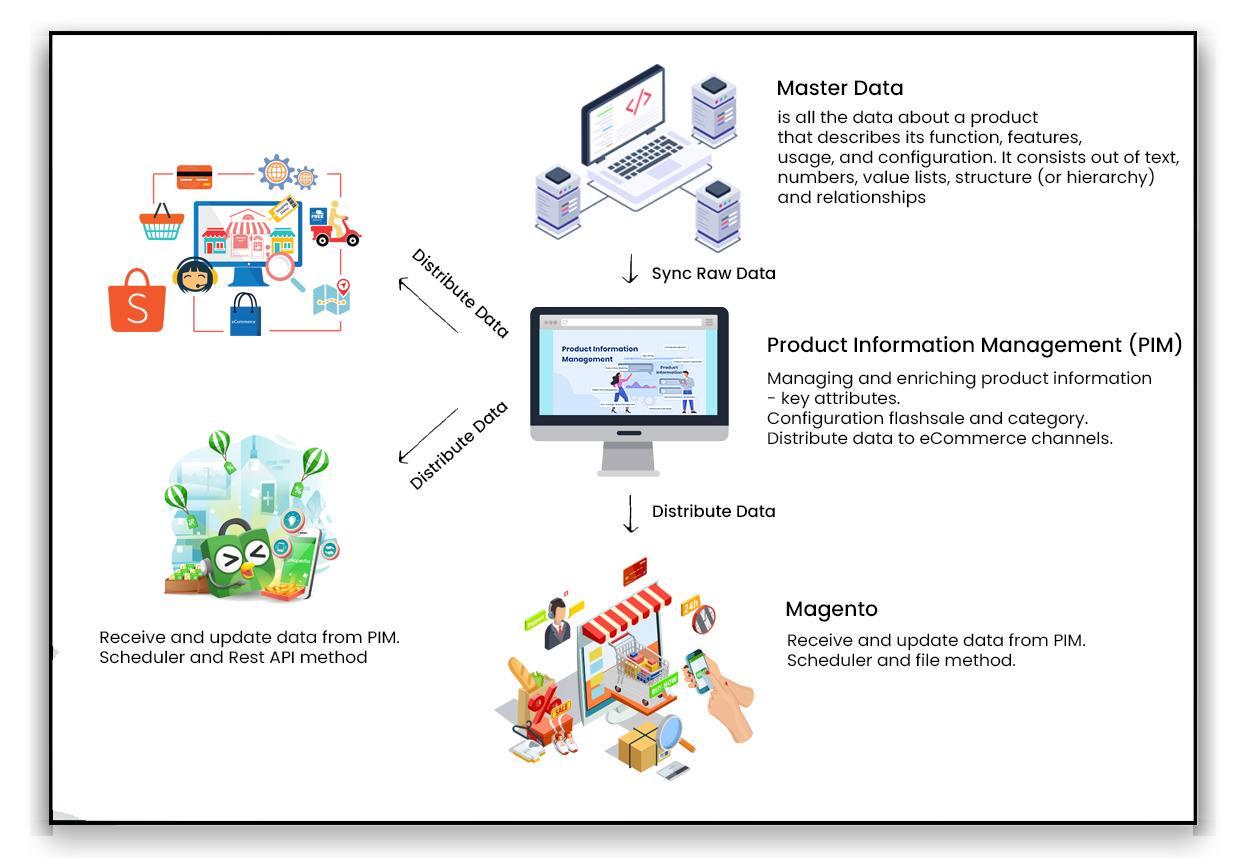
<style>
.page{position:relative;width:1248px;height:858px;background:#ffffff}
.page>*{position:absolute;margin:0}
.t1{font:20.8px "Poppins-Medium";color:#000000}
.t2{font:16.7px "Poppins-Regular";color:#000000;scale:1.03 1}
.t3{font:16.7px "Poppins-Medium";color:#000000}
.t4{font:16.7px "Poppins-Regular";color:#000000}
</style>
<div class="page">
<p class="t1" style="left:778px;top:80px;width:125px;height:16px">Master Data</p>
<p class="t2" style="left:777px;top:110px;width:402px;height:98px">is all the data about a product <br>that describes its function, features, <br>usage, and configuration. It consists out of text, <br>numbers, value lists, structure (or hierarchy) <br>and relationships</p>
<p class="t3" style="left:412px;top:248px;width:97px;height:91px;rotate:42deg">Distribute Data</p>
<p class="t3" style="left:652px;top:267px;width:124px;height:17px">Sync Raw Data</p>
<p class="t1" style="left:768px;top:332px;width:414px;height:26px">Product Information Management (PIM)</p>
<p class="t4" style="left:767px;top:371px;width:385px;height:74px">Managing and enriching product information<br>- key attributes.<br>Configuration flashsale and category.<br>Distribute data to eCommerce channels.</p>
<p class="t3" style="left:409px;top:401px;width:99px;height:89px;rotate:-42deg">Distribute Data</p>
<p class="t3" style="left:653px;top:504px;width:122px;height:14px">Distribute Data</p>
<p class="t1" style="left:786px;top:601px;width:92px;height:21px">Magento</p>
<p class="t4" style="left:100px;top:630px;width:299px;height:34px">Receive and update data from PIM.<br>Scheduler and Rest API method</p>
<p class="t4" style="left:787px;top:633px;width:298px;height:34px">Receive and update data from PIM.<br>Scheduler and file method.</p>
</div>
